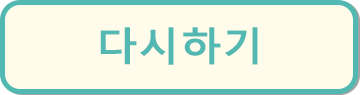
<style>
.page{position:relative;width:360px;height:95px;background:#fffceb}
.page>*{position:absolute;margin:0}
.t1{font:39.6px "MalgunGothicBold";letter-spacing:0.01em;color:#51b8b2;scale:1.05 1}
</style>
<div class="page">
<p class="t1" style="left:100px;top:27px;width:158px;height:38px">다시하기</p>
</div>
